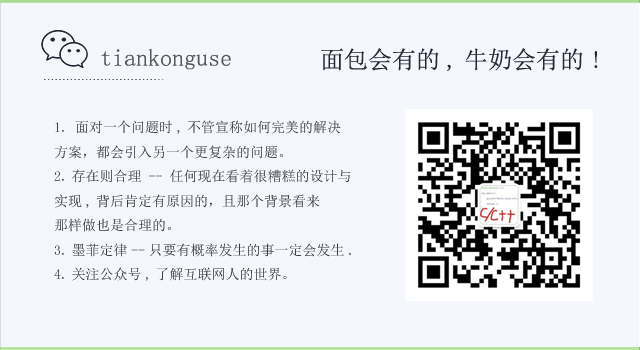
<style>
.page{position:relative;width:640px;height:350px;background:#f4f7fc}
.page>*{position:absolute;margin:0}
.t1{font:24px "NSimSun";color:#535456}
.t2{font:24px "NSimSun";color:#282737}
.t3{font:14px "NSimSun";color:#3a3d42}
</style>
<div class="page">
<p class="t1" style="left:101px;top:48px;width:130px;height:22px">tiankonguse</p>
<p class="t2" style="left:321px;top:48px;width:277px;height:23px">面包会有的,牛奶会有的!</p>
<p class="t3" style="left:54px;top:120px;width:297px;height:161px">1. 面对一个问题时,不管宣称如何完美的解决<br>方案，都会引入另一个更复杂的问题。<br>2.存在则合理 -- 任何现在看着很糟糕的设计与<br>实现,背后肯定有原因的，且那个背景看来<br>那样做也是合理的。<br>3.墨菲定律--只要有概率发生的事一定会发生.<br>4.关注公众号,了解互联网人的世界。</p>
</div>
